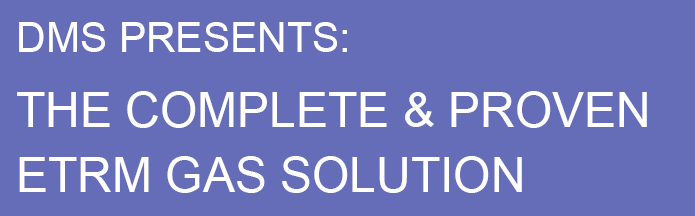
<style>
.page{position:relative;width:695px;height:216px;background:#656db8}
.page>*{position:absolute;margin:0}
.t1{font:48px "ArialMT";color:#ffffff}
.t2{font:41px "ArialMT";color:#ffffff}
</style>
<div class="page">
<p class="t1" style="left:17px;top:22px;width:630px;height:171px"><span class="t2">DMS PRESENTS:<br><br></span>THE COMPLETE &amp; PROVEN<br><br>ETRM GAS SOLUTION</p>
</div>
